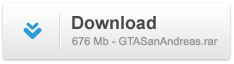
<style>
.page{position:relative;width:234px;height:64px}
.page>*{position:absolute;margin:0}
.t1{font:18px "Arial-BoldMT";color:#4a4a4a}
.t2{font:11px "ArialMT";color:#949494}
</style>
<div class="page">
<p class="t1" style="left:72px;top:16px;width:84px;height:14px">Download</p>
<p class="t2" style="left:72px;top:36px;width:146px;height:10px">676 Mb - GTASanAndreas.rar</p>
</div>
